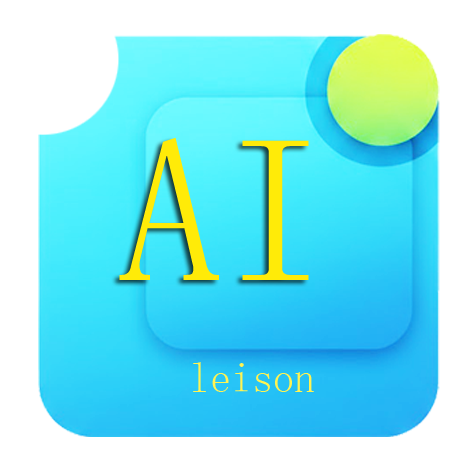
<style>
.page{position:relative;width:474px;height:472px;background:#ffffff}
.page>*{position:absolute;margin:0}
.t1{font:208.4px "SimSun";color:#ffeb08}
.t2{font:42px "SimSun";color:#fff352}
</style>
<div class="page">
<p class="t1" style="left:119px;top:137px;width:190px;height:143px">AI</p>
<p class="t2" style="left:193px;top:362px;width:121px;height:30px">leison</p>
</div>
